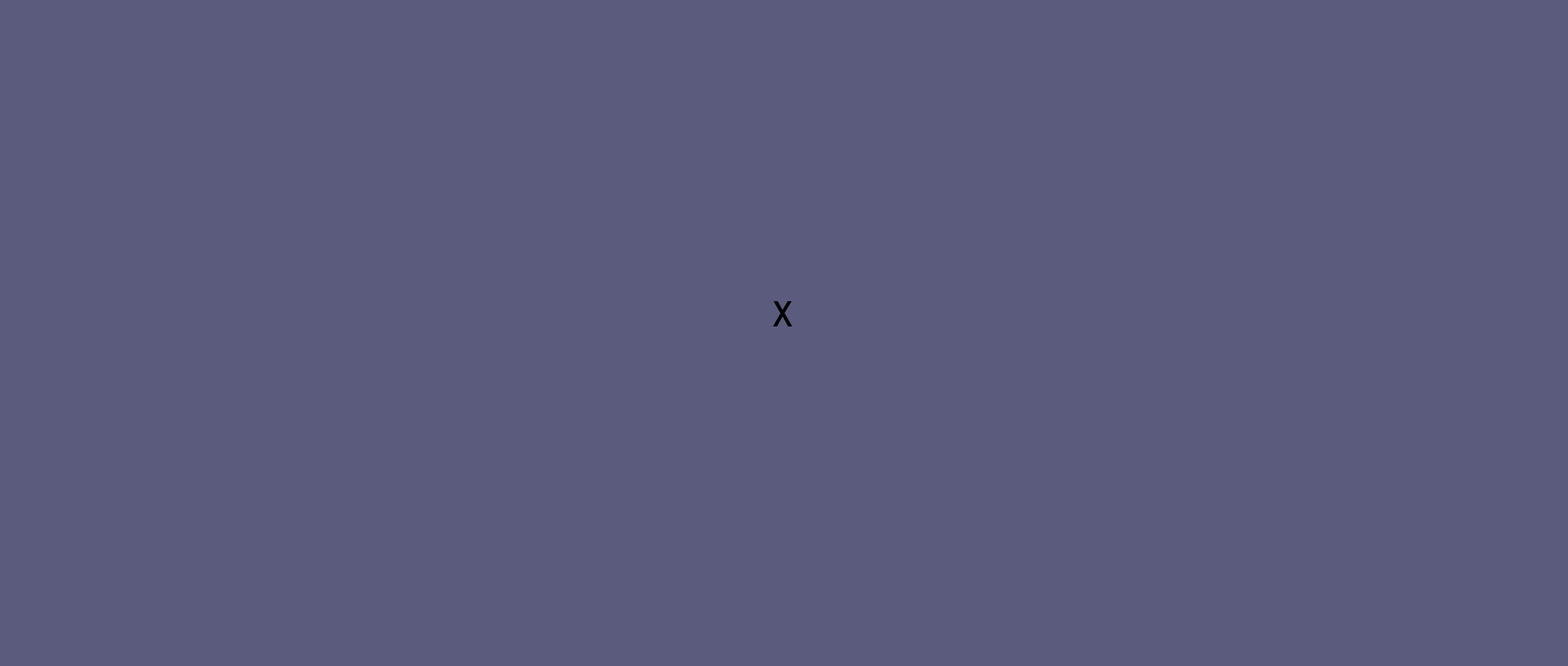
<style>
.page{position:relative;width:1568px;height:666px;background:#5b5c7d}
.page>*{position:absolute;margin:0}
.t1{font:49px "ArialNarrow";color:#000000}
</style>
<div class="page">
<p class="t1" style="left:773px;top:301px;width:20px;height:26px">x</p>
</div>
